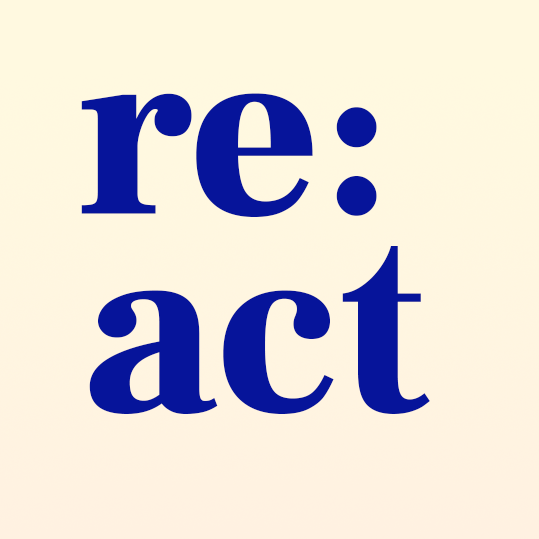
<style>
.page{position:relative;width:539px;height:539px}
.page>*{position:absolute;margin:0}
.t1{font:250px "FrankRuhlLibre-Black";color:#06149a}
</style>
<div class="page">
<p class="t1" style="left:81px;top:93px;width:296px;height:124px">re:</p>
<p class="t1" style="left:89px;top:246px;width:341px;height:168px">act</p>
</div>
